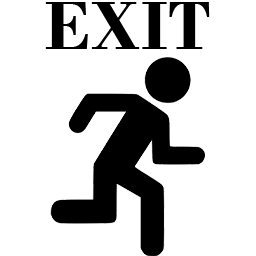
<style>
.page{position:relative;width:256px;height:256px;background:#ffffff}
.page>*{position:absolute;margin:0}
.t1{font:72px "BodoniMT-Bold";color:#000000}
</style>
<div class="page">
<p class="t1" style="left:45px;top:2px;width:165px;height:47px">EXIT</p>
</div>
